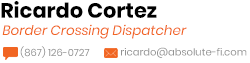
<style>
.page{position:relative;width:250px;height:63px;background:#ffffff}
.page>*{position:absolute;margin:0}
.t1{font:20.7px "Poppins-Bold";color:#000000}
.t2{font:13.4px "Poppins-Italic";color:#f16522}
.t3{font:9.9px "Poppins-Regular";color:#939393}
</style>
<div class="page">
<p class="t1" style="left:1px;top:1px;width:156px;height:17px">Ricardo Cortez</p>
<p class="t2" style="left:2px;top:24px;width:185px;height:15px">Border Crossing Dispatcher</p>
<p class="t3" style="left:20px;top:46px;width:70px;height:12px">(867) 126-0727</p>
<p class="t3" style="left:121px;top:47px;width:126px;height:11px">ricardo@absolute-fi.com</p>
</div>
